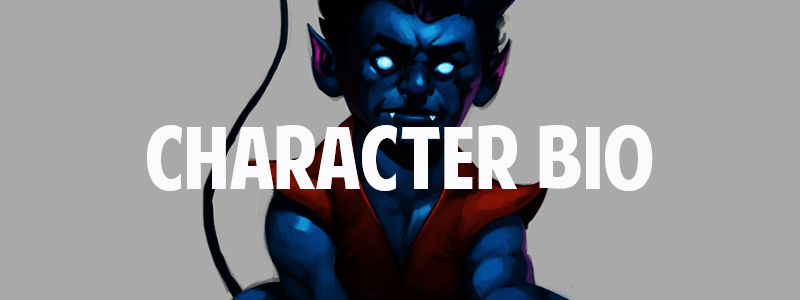
<style>
.page{position:relative;width:800px;height:300px;background:#a9a9a9}
.page>*{position:absolute;margin:0}
.t1{font:84.9px "AmericanPurpose";color:#f7f8fc}
</style>
<div class="page">
<p class="t1" style="left:147px;top:125px;width:506px;height:66px">Character Bio</p>
</div>
